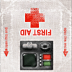
<style>
.page{position:relative;width:72px;height:72px}
.page>*{position:absolute;margin:0}
.t1{font:7.7px "Arial-BoldMT";color:#e52d21;font-weight:bold;scale:0.8 1}
</style>
<div class="page">
<p class="t1" style="left:20px;top:29px;width:32px;height:7px;rotate:180deg">FIRST AID</p>
</div>
